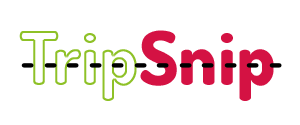
<style>
.page{position:relative;width:300px;height:125px;background:#ffffff}
.page>*{position:absolute;margin:0}
.t1{font:74px "Dosis-ExtraBold";color:#8ec127}
.t2{font:74px "Dosis-ExtraBold";color:#d41243}
</style>
<div class="page">
<p class="t1" style="left:19px;top:30px;width:255px;height:71px">Trip<span class="t2">Snip</span></p>
</div>
